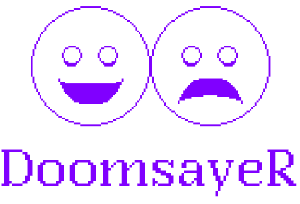
<style>
.page{position:relative;width:300px;height:204px;background:#ffffff}
.page>*{position:absolute;margin:0}
.t1{font:52.1px "ArgentPixelCF-Regular";color:#8000ff}
</style>
<div class="page">
<p class="t1" style="left:1px;top:149px;width:296px;height:48px">DoomsayeR</p>
</div>
